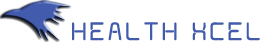
<style>
.page{position:relative;width:263px;height:42px;background:#ffffff}
.page>*{position:absolute;margin:0}
.t1{font:28px "AunchantedXspace";letter-spacing:0.025em;color:#425bac;font-weight:bold}
</style>
<div class="page">
<p class="t1" style="left:72px;top:22px;width:188px;height:19px">HEALTH XCEL</p>
</div>
